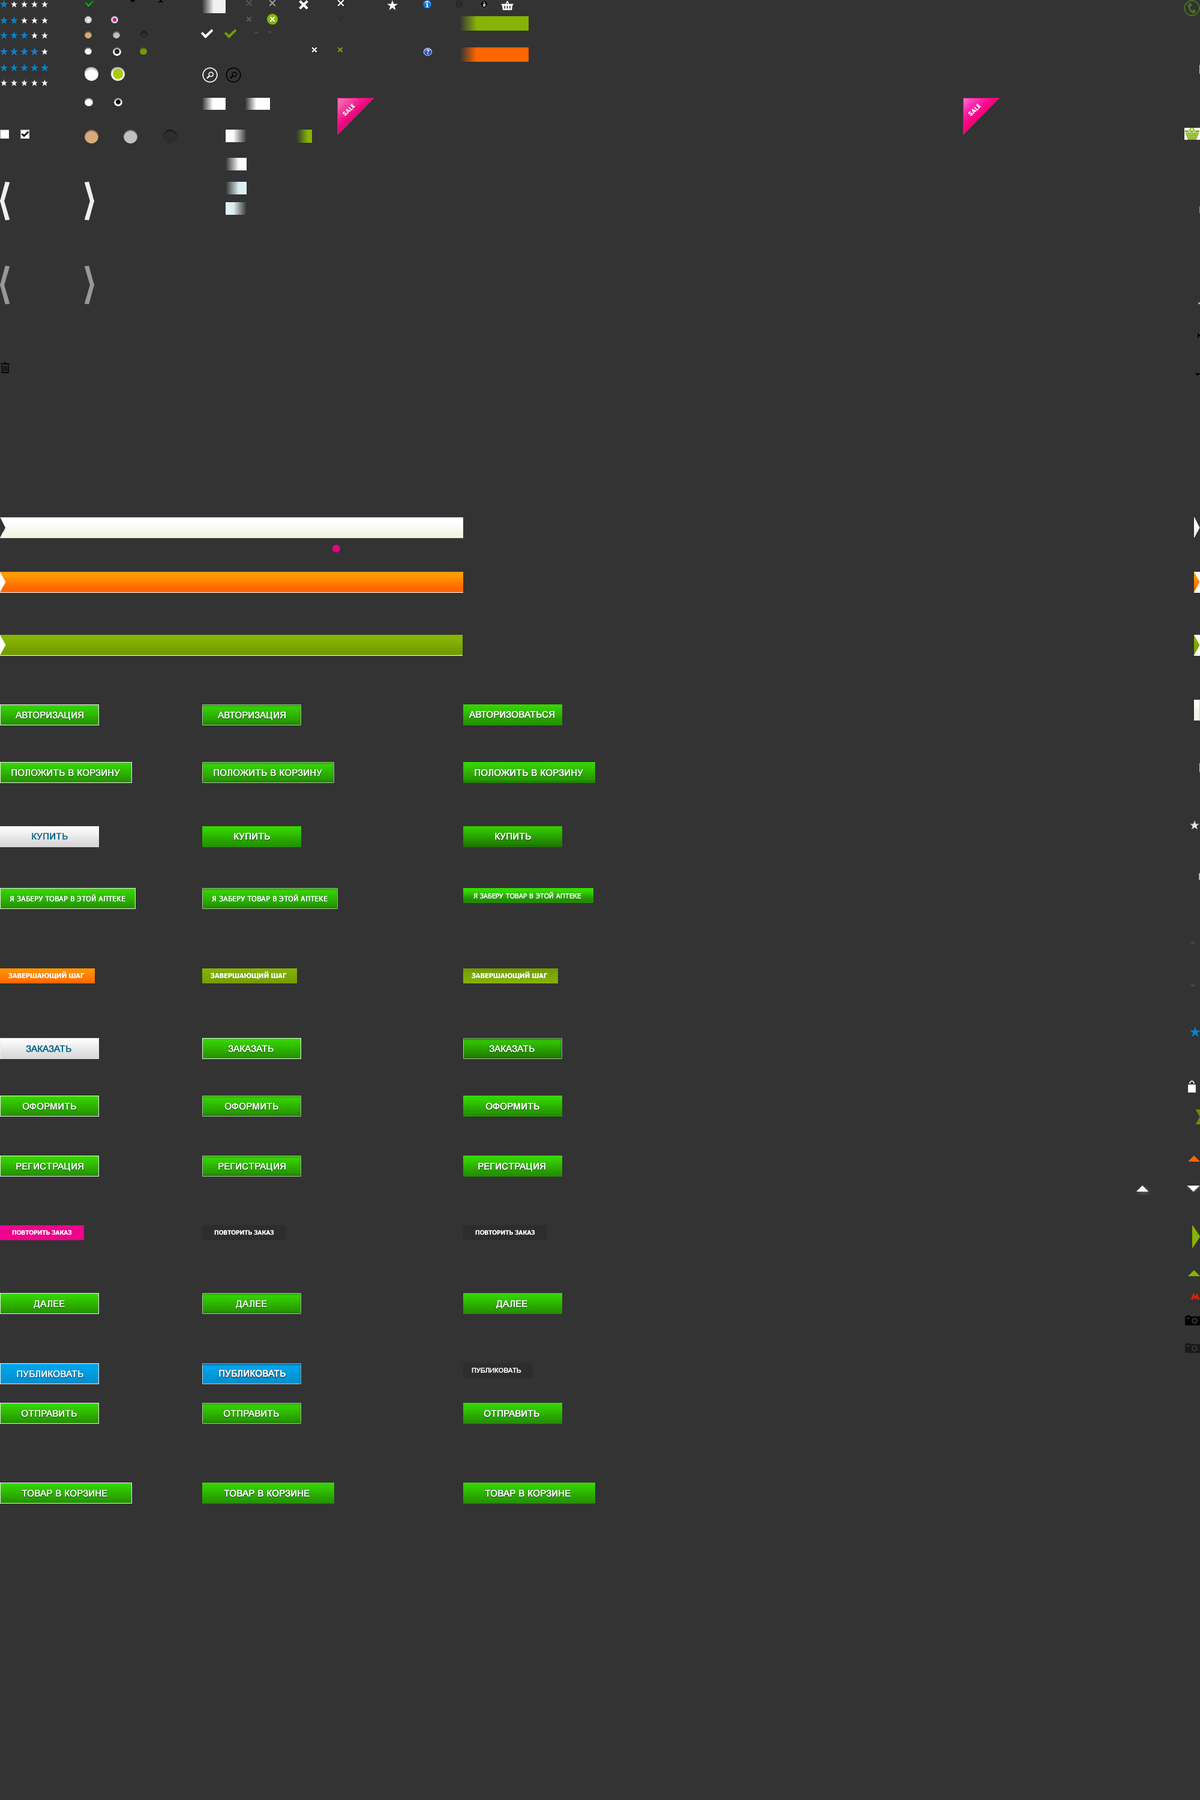
<style>
.page{position:relative;width:1200px;height:1800px;background:#333333}
.page>*{position:absolute;margin:0}
.t1{font:9px "ArialMT";color:#ffffff;font-weight:bold}
.t2{font:9px "ArialMT";font-weight:bold}
.t3{font:9px "ArialMT";color:#03648c;font-weight:bold}
.t4{font:6.6px "Tahoma";color:#ffffff;font-weight:bold}
.t5{font:6px "Tahoma-Bold";color:#ffffff}
.t6{font:6.6px "Arial-BoldMT";color:#ffffff}
</style>
<div class="page">
<p class="t1" style="left:469px;top:711px;width:85px;height:7px">АВТОРИЗОВАТЬСЯ</p>
<p class="t2" style="left:11px;top:769px;width:109px;height:7px">ПОЛОЖИТЬ В КОРЗИНУ</p>
<p class="t1" style="left:214px;top:769px;width:108px;height:7px">ПОЛОЖИТЬ В КОРЗИНУ</p>
<p class="t1" style="left:475px;top:769px;width:108px;height:7px">ПОЛОЖИТЬ В КОРЗИНУ</p>
<p class="t3" style="left:32px;top:833px;width:36px;height:7px">КУПИТЬ</p>
<p class="t1" style="left:234px;top:833px;width:36px;height:7px">КУПИТЬ</p>
<p class="t1" style="left:495px;top:833px;width:36px;height:7px">КУПИТЬ</p>
<p class="t4" style="left:473px;top:892px;width:108px;height:7px">Я ЗАБЕРУ ТОВАР В ЭТОЙ АПТЕКЕ</p>
<p class="t2" style="left:26px;top:1045px;width:45px;height:7px">ЗАКАЗАТЬ</p>
<p class="t2" style="left:228px;top:1045px;width:46px;height:7px">ЗАКАЗАТЬ</p>
<p class="t2" style="left:489px;top:1045px;width:46px;height:7px">ЗАКАЗАТЬ</p>
<p class="t1" style="left:22px;top:1103px;width:54px;height:7px">ОФОРМИТЬ</p>
<p class="t1" style="left:224px;top:1103px;width:54px;height:7px">ОФОРМИТЬ</p>
<p class="t1" style="left:485px;top:1103px;width:54px;height:7px">ОФОРМИТЬ</p>
<p class="t1" style="left:478px;top:1163px;width:67px;height:9px">РЕГИСТРАЦИЯ</p>
<p class="t5" style="left:12px;top:1230px;width:60px;height:5px">ПОВТОРИТЬ ЗАКАЗ</p>
<p class="t5" style="left:214px;top:1230px;width:60px;height:5px">ПОВТОРИТЬ ЗАКАЗ</p>
<p class="t5" style="left:475px;top:1230px;width:60px;height:5px">ПОВТОРИТЬ ЗАКАЗ</p>
<p class="t2" style="left:33px;top:1300px;width:31px;height:9px">ДАЛЕЕ</p>
<p class="t2" style="left:235px;top:1300px;width:31px;height:9px">ДАЛЕЕ</p>
<p class="t1" style="left:496px;top:1300px;width:31px;height:9px">ДАЛЕЕ</p>
<p class="t1" style="left:17px;top:1370px;width:66px;height:7px">ПУБЛИКОВАТЬ</p>
<p class="t1" style="left:219px;top:1370px;width:67px;height:7px">ПУБЛИКОВАТЬ</p>
<p class="t6" style="left:472px;top:1367px;width:49px;height:6px">ПУБЛИКОВАТЬ</p>
<p class="t2" style="left:20px;top:1410px;width:56px;height:7px">ОТПРАВИТЬ</p>
<p class="t2" style="left:223px;top:1410px;width:55px;height:7px">ОТПРАВИТЬ</p>
<p class="t1" style="left:484px;top:1410px;width:55px;height:7px">ОТПРАВИТЬ</p>
<p class="t1" style="left:22px;top:1490px;width:85px;height:7px">ТОВАР В КОРЗИНЕ</p>
<p class="t2" style="left:22px;top:1490px;width:86px;height:7px">ТОВАР В КОРЗИНЕ</p>
<p class="t1" style="left:224px;top:1490px;width:86px;height:7px">ТОВАР В КОРЗИНЕ</p>
<p class="t1" style="left:485px;top:1490px;width:86px;height:7px">ТОВАР В КОРЗИНЕ</p>
</div>
